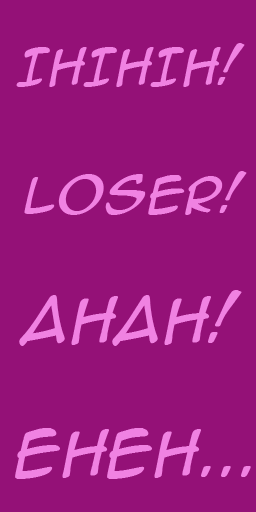
<style>
.page{position:relative;width:256px;height:512px;background:#941177}
.page>*{position:absolute;margin:0}
.t1{font:48px "AnimeAce2.0BB-Italic";letter-spacing:0.03em;color:#f082e2}
.t2{font:60px "AnimeAce2.0BB-Italic";letter-spacing:0.03em;color:#f082e2}
</style>
<div class="page">
<p class="t1" style="left:16px;top:43px;width:229px;height:44px">IhIHIH!</p>
<p class="t1" style="left:24px;top:171px;width:223px;height:44px">LOSER!</p>
<p class="t2" style="left:19px;top:290px;width:223px;height:56px">AHAH!</p>
<p class="t2" style="left:15px;top:428px;width:236px;height:51px">EHEH...</p>
</div>
